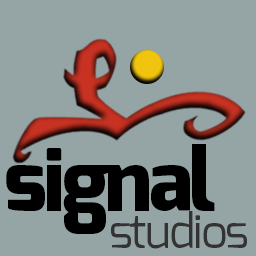
<style>
.page{position:relative;width:256px;height:256px;background:#95a5a6}
.page>*{position:absolute;margin:0}
.t1{font:85px "Exo-ExtraBold";letter-spacing:-0.04em;color:#000000}
.t2{font:47px "Exo-Regular";letter-spacing:-0.04em;color:#333333}
</style>
<div class="page">
<p class="t1" style="left:6px;top:144px;width:209px;height:90px">signal</p>
<p class="t2" style="left:111px;top:211px;width:136px;height:38px">studios</p>
</div>
